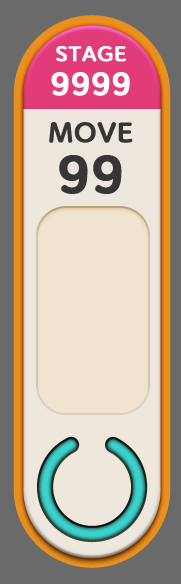
<style>
.page{position:relative;width:181px;height:584px;background:#ede7dd}
.page>*{position:absolute;margin:0}
.t1{font:20px "Binggrae-Bold";color:#ffffff;font-weight:bold}
.t2{font:30px "Binggrae-Bold";color:#ffffff;font-weight:bold}
.t3{font:26px "Binggrae-Bold";color:#363636;font-weight:bold}
.t4{font:50px "Binggrae-Bold";color:#363636;font-weight:bold}
</style>
<div class="page">
<p class="t1" style="left:56px;top:46px;width:70px;height:16px">STAGE</p>
<p class="t2" style="left:51px;top:72px;width:79px;height:24px">9999</p>
<p class="t3" style="left:49px;top:122px;width:84px;height:21px">MOVE</p>
<p class="t4" style="left:59px;top:155px;width:63px;height:39px">99</p>
</div>
